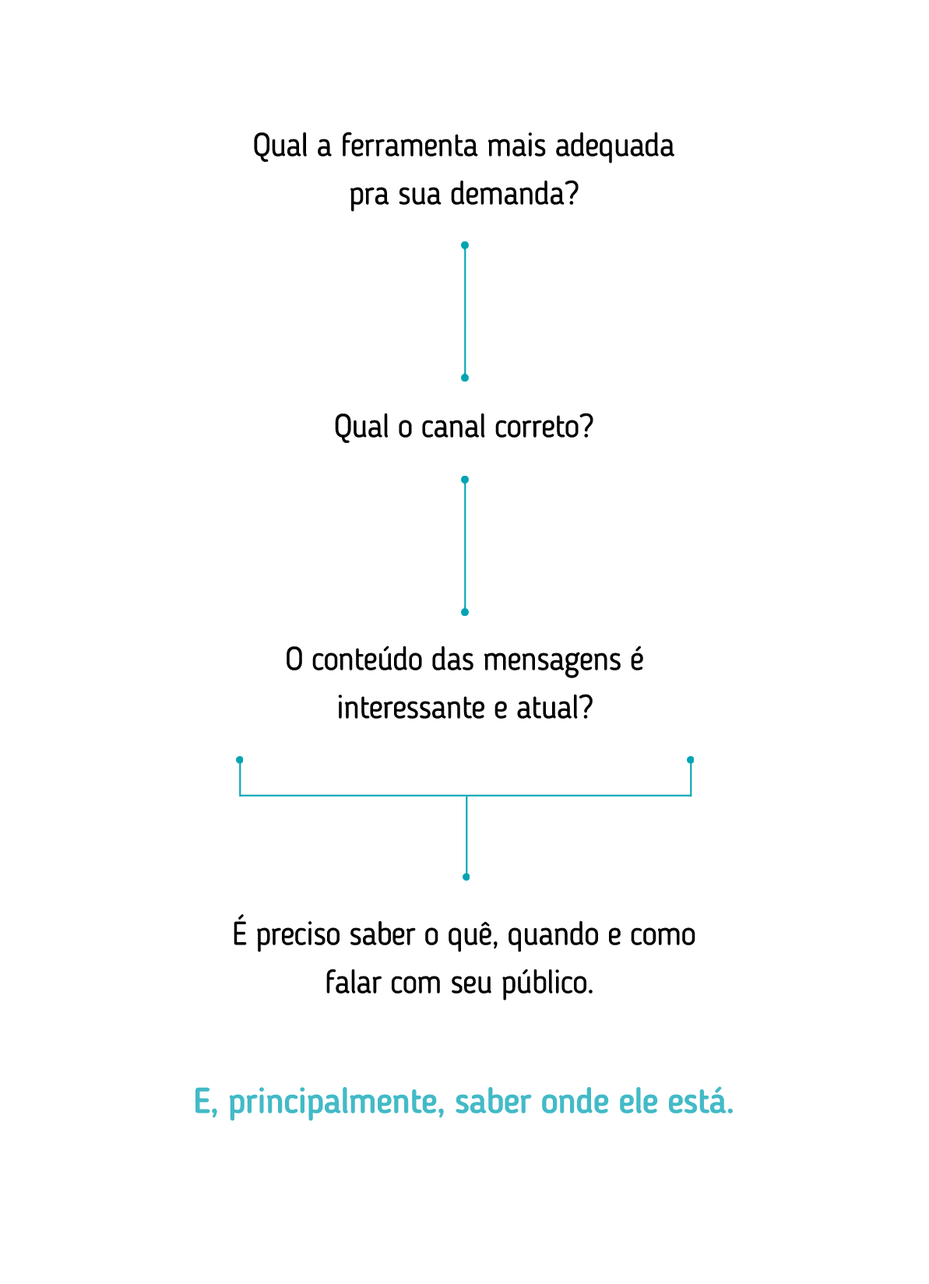
<style>
.page{position:relative;width:929px;height:1284px;background:#ffffff}
.page>*{position:absolute;margin:0}
.t1{font:32.7px/48.3px "BloggerSans";letter-spacing:-0.025em;color:#000000}
.t2{font:32.7px "BloggerSans";letter-spacing:-0.025em;color:#000000}
.t3{font:35.8px "BloggerSans-Medium";letter-spacing:-0.025em;color:#43bac7}
</style>
<div class="page">
<p class="t1" style="left:254px;top:132px;width:420px;height:80px;text-align:center">Qual a ferramenta mais adequada<br>pra sua demanda?</p>
<p class="t2" style="left:335px;top:413px;width:258px;height:30px">Qual o canal correto?</p>
<p class="t1" style="left:287px;top:645px;width:356px;height:74px;text-align:center">O conteúdo das mensagens é<br>interessante e atual?</p>
<p class="t1" style="left:234px;top:914px;width:461px;height:86px;text-align:center">É preciso saber o quê, quando e como<br>falar com seu público.</p>
<p class="t3" style="left:195px;top:1086px;width:538px;height:35px">E, principalmente, saber onde ele está.</p>
</div>
